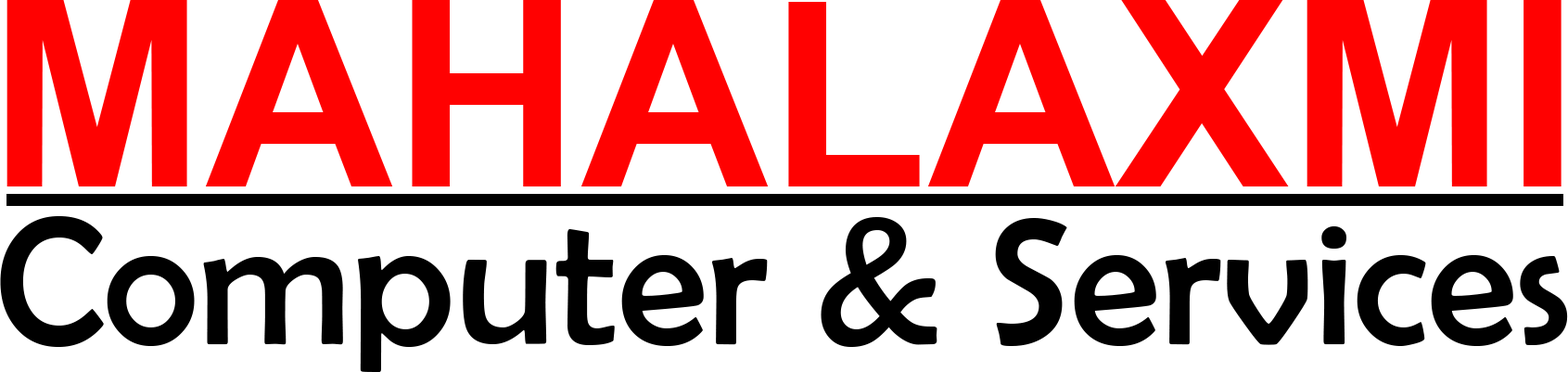
<style>
.page{position:relative;width:1568px;height:372px;background:#ffffff}
.page>*{position:absolute;margin:0}
.t1{font:259.9px "Arial-BoldMT";color:#ff0101}
.t2{font:182.7px "BerlinSansFB-Reg";color:#000000}
</style>
<div class="page">
<p class="t1" style="left:6px;top:0px;width:1556px;height:186px">MAHALAXMI</p>
<p class="t2" style="left:0px;top:216px;width:1568px;height:156px">Computer &amp; Services</p>
</div>
